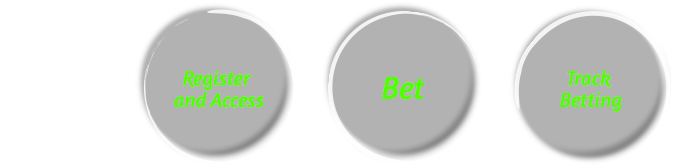
<style>
.page{position:relative;width:675px;height:168px;background:#ffffff}
.page>*{position:absolute;margin:0}
.t1{font:20.5px/21.7px "Amaranth-Italic";color:#4eff00}
.t2{font:32px "Amaranth-Italic";color:#4eff00}
</style>
<div class="page">
<p class="t1" style="left:174px;top:70px;width:90px;height:38px;text-align:center">Register <br>and Access</p>
<p class="t2" style="left:382px;top:77px;width:43px;height:23px">Bet</p>
<p class="t1" style="left:560px;top:70px;width:62px;height:42px;text-align:center">Track <br>Betting</p>
</div>
